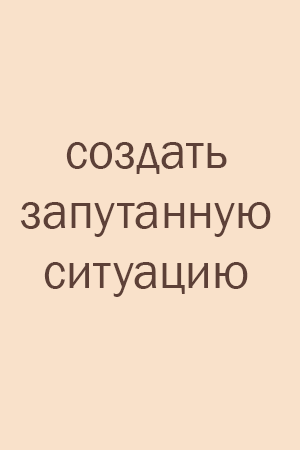
<style>
.page{position:relative;width:300px;height:450px;background:#f9e1ca}
.page>*{position:absolute;margin:0}
.t1{font:50px "FranklinGothic-Book";color:#5d4037}
</style>
<div class="page">
<p class="t1" style="left:20px;top:142px;width:251px;height:155px;text-align:center">создать<br>запутанную<br>ситуацию</p>
</div>
